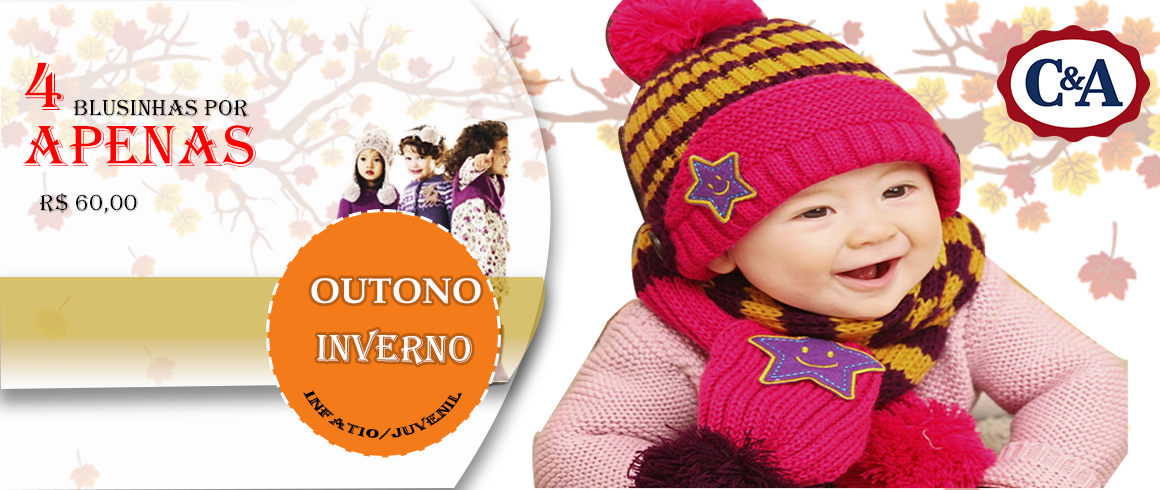
<style>
.page{position:relative;width:1160px;height:490px}
.page>*{position:absolute;margin:0}
.t1{font:72px "Algerian";color:#fb0000}
.t2{font:24px "Algerian";color:#000000}
.t3{font:60px "Algerian";color:#ff0000}
.t4{font:36.1px "BookAntiqua-Bold";color:#fefcfc}
.t5{font:39.1px "Algerian";color:#ffffff}
.t6{font:13.1px "Algerian";color:#000000;scale:1.1 1}
</style>
<div class="page">
<p class="t1" style="left:25px;top:62px;width:39px;height:48px">4</p>
<p class="t2" style="left:73px;top:99px;width:177px;height:19px">Blusinhas por</p>
<p class="t3" style="left:23px;top:125px;width:233px;height:42px">APENAS</p>
<p class="t2" style="left:40px;top:193px;width:98px;height:21px">r$ 60,00</p>
<p class="t4" style="left:311px;top:278px;width:170px;height:26px">OUTONO</p>
<p class="t5" style="left:317px;top:329px;width:155px;height:36px;rotate:1deg">INVERNO</p>
<p class="t6" style="left:303px;top:389px;width:159px;height:51px;rotate:-15deg">Infatio/juvenil</p>
</div>
